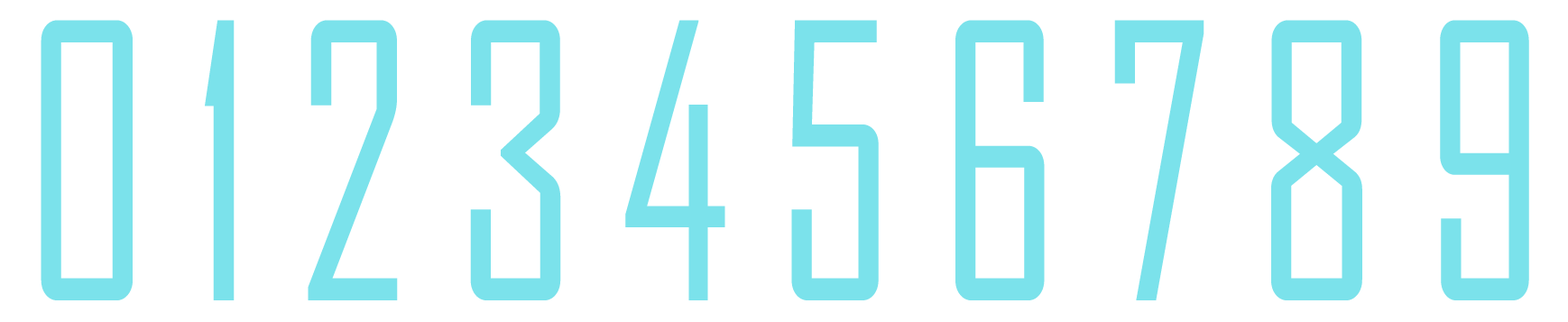
<style>
.page{position:relative;width:1568px;height:322px;background:#ffffff}
.page>*{position:absolute;margin:0}
.t1{font:366.5px "AgencyFB-Reg";letter-spacing:-0.025em;color:#7be2eb;font-variant:small-caps;scale:0.8 1}
</style>
<div class="page">
<p class="t1" style="left:41px;top:20px;width:1488px;height:280px">0 1 2 3 4 5 6 7 8 9</p>
</div>
